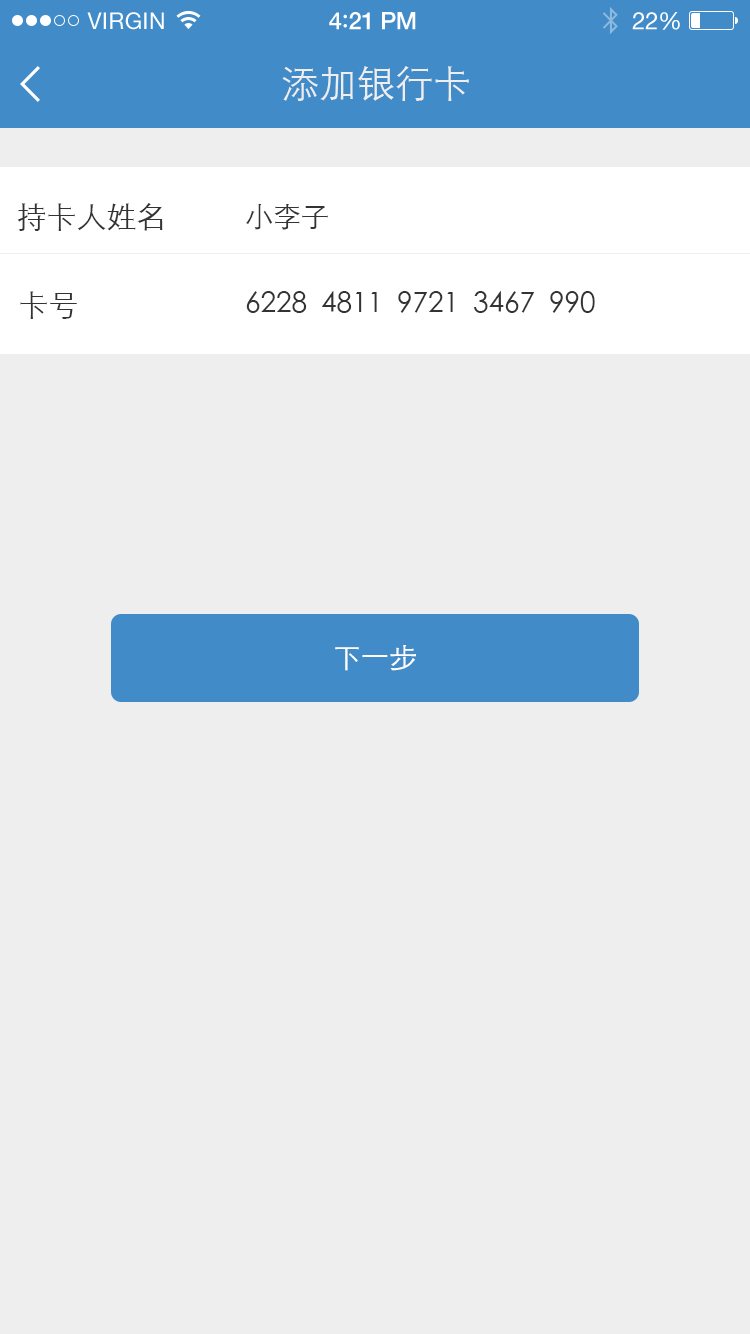
<style>
.page{position:relative;width:750px;height:1334px;background:#eeeeee}
.page>*{position:absolute;margin:0}
.t1{font:23px "HelveticaNeue";letter-spacing:0.02em;color:#ffffff}
.t2{font:24px "HelveticaNeue-Medium";letter-spacing:-0.02em;color:#ffffff}
.t3{font:26px "Avenir-Medium";letter-spacing:-0.02em;color:#ffffff}
.t4{font:24px "HelveticaNeue";letter-spacing:-0.02em;color:#ffffff}
.t5{font:38px "STXihei";color:#eeeeee}
.t6{font:30px "STXihei";color:#333333}
.t7{font:28px "STXihei";color:#333333}
.t8{font:28px "STXihei";color:#ffffff}
</style>
<div class="page">
<p class="t1" style="left:87px;top:12px;width:77px;height:18px">VIRGIN</p>
<p class="t2" style="left:329px;top:12px;width:87px;height:18px">4<span class="t3">:</span>21 PM</p>
<p class="t4" style="left:632px;top:12px;width:48px;height:18px">22%</p>
<p class="t5" style="left:282px;top:66px;width:187px;height:35px">添加银行卡</p>
<p class="t6" style="left:17px;top:203px;width:146px;height:28px">持卡人姓名</p>
<p class="t7" style="left:246px;top:203px;width:82px;height:27px">小李子</p>
<p class="t6" style="left:20px;top:291px;width:57px;height:28px">卡号</p>
<p class="t7" style="left:246px;top:291px;width:349px;height:22px">6228  4811  9721  3467  990</p>
<p class="t8" style="left:335px;top:645px;width:81px;height:26px">下一步</p>
</div>
